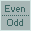
<style>
.page{position:relative;width:31px;height:31px;background:#a7b6b5}
.page>*{position:absolute;margin:0}
.t1{font:9px "Small Fonts";color:#3e6764}
</style>
<div class="page">
<p class="t1" style="left:5px;top:5px;width:20px;height:7px">Even</p>
<p class="t1" style="left:7px;top:19px;width:16px;height:7px">Odd</p>
</div>
